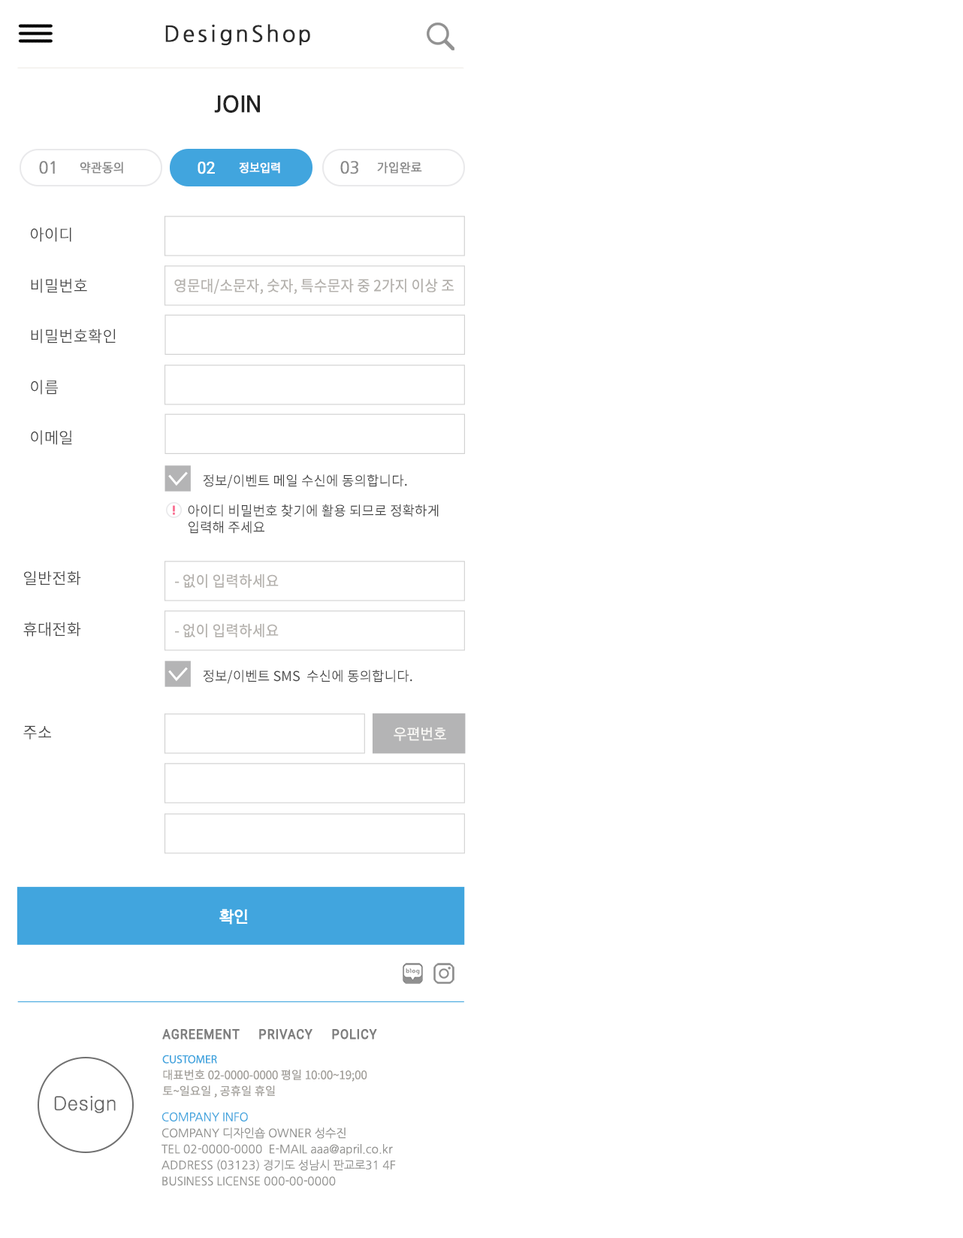
<style>
.page{position:relative;width:963px;height:1238px;background:#ffffff}
.page>*{position:absolute;margin:0}
.t1{font:21.9px "NanumGothic";letter-spacing:0.12em;color:#2b2b2b;font-weight:bold}
.t2{font:22.5px "NanumGothicBold";color:#232323;text-transform:uppercase}
.t3{font:16.5px "NanumGothic";color:#888888;font-weight:bold;scale:0.95 1}
.t4{font:12px "NanumGothic";color:#888888;font-weight:bold;scale:0.95 1}
.t5{font:12px "NotoSansCJKkr-Regular";color:#888888;font-weight:bold;scale:0.95 1}
.t6{font:16.5px "Roboto-Regular";color:#ffffff;font-weight:bold;scale:0.95 1}
.t7{font:12px "NotoSansCJKkr-Regular";color:#ffffff;font-weight:bold;scale:0.95 1}
.t8{font:15.9px/50.7px "NotoSansCJKkr-Regular";color:#474747}
.t9{font:15px "NotoSansCJKkr-Regular";color:#b4b1ad;text-transform:uppercase;scale:0.95 1}
.t10{font:13.5px "NotoSansCJKkr-Regular";color:#474747}
.t11{font:13.5px/16.5px "NotoSansCJKkr-Regular";color:#474747}
.t12{font:15.9px "NotoSansCJKkr-Regular";color:#474747}
.t13{font:15.1px "KoreanGD13-R";color:#f9f8f5;text-transform:uppercase}
.t14{font:16px "RixGoM";color:#ffffff;text-transform:uppercase;font-weight:bold}
.t15{font:13.4px "Roboto-Regular";letter-spacing:0.05em;color:#7e7e7e;font-weight:bold;scale:0.9 1}
.t16{font:11.6px/16px "NotoSansCJKkr-Regular";color:#a19e99}
.t17{font:11.6px/16px "MyriadPro-Regular";color:#41a5de;text-transform:uppercase}
.t18{font:19.5px "Gulim";color:#686868}
.t19{font:11.6px/16px "NanumGothic";color:#959593}
.t20{font:11.6px/16px "NanumGothic";color:#41a5de}
</style>
<div class="page">
<p class="t1" style="left:165px;top:24px;width:145px;height:22px">DesignShop</p>
<p class="t2" style="left:214px;top:95px;width:46px;height:18px">Join</p>
<p class="t3" style="left:39px;top:161px;width:16px;height:13px">01</p>
<p class="t4" style="left:80px;top:162px;width:43px;height:12px"><span class="t5"> </span>약관동의</p>
<p class="t6" style="left:198px;top:162px;width:17px;height:12px">02</p>
<p class="t7" style="left:239px;top:162px;width:41px;height:12px">정보입력</p>
<p class="t3" style="left:340px;top:161px;width:18px;height:13px">03</p>
<p class="t4" style="left:377px;top:162px;width:45px;height:12px">가입완료</p>
<p class="t8" style="left:31px;top:227px;width:85px;height:218px">아이디<br>비밀번호<br>비밀번호확인<br>이름<br>이메일</p>
<p class="t9" style="left:174px;top:278px;width:280px;height:17px">영문대/소문자, 숫자, 특수문자 중 2가지 이상 조</p>
<p class="t10" style="left:203px;top:474px;width:204px;height:14px">정보/이벤트 메일 수신에 동의합니다.</p>
<p class="t11" style="left:188px;top:504px;width:251px;height:30px">아이디 비밀번호 찾기에 활용 되므로 정확하게 <br>입력해 주세요</p>
<p class="t8" style="left:23px;top:570px;width:58px;height:67px">일반전화<br>휴대전화</p>
<p class="t9" style="left:175px;top:573px;width:104px;height:15px">- 없이 입력하세요</p>
<p class="t9" style="left:175px;top:623px;width:104px;height:14px">- 없이 입력하세요</p>
<p class="t10" style="left:203px;top:670px;width:210px;height:14px">정보/이벤트 SMS  수신에 동의합니다.</p>
<p class="t12" style="left:23px;top:725px;width:28px;height:14px">주소</p>
<p class="t13" style="left:394px;top:727px;width:52px;height:14px">우편번호</p>
<p class="t14" style="left:219px;top:909px;width:29px;height:15px">확인</p>
<p class="t15" style="left:162px;top:1029px;width:215px;height:10px">AGREEMENT     PRIVACY     POLICY</p>
<p class="t16" style="left:162px;top:1054px;width:205px;height:43px"><span class="t17">CUSTOmer   <br></span>대표번호 02-0000-0000 평일 10:00~19;00 <br>토~일요일 , 공휴일 휴일</p>
<p class="t18" style="left:54px;top:1095px;width:62px;height:18px">Design</p>
<p class="t19" style="left:162px;top:1111px;width:234px;height:75px"><span class="t20">COMPANY INFO<br></span>COMPANY 디자인숍 OWNER 성수진  <br>TEL 02-0000-0000  E-MAIL aaa@april.co.kr  <br>ADDRESS (03123) 경기도 성남시 판교로31 4F<br>BUSINESS LICENSE 000-00-0000</p>
</div>
